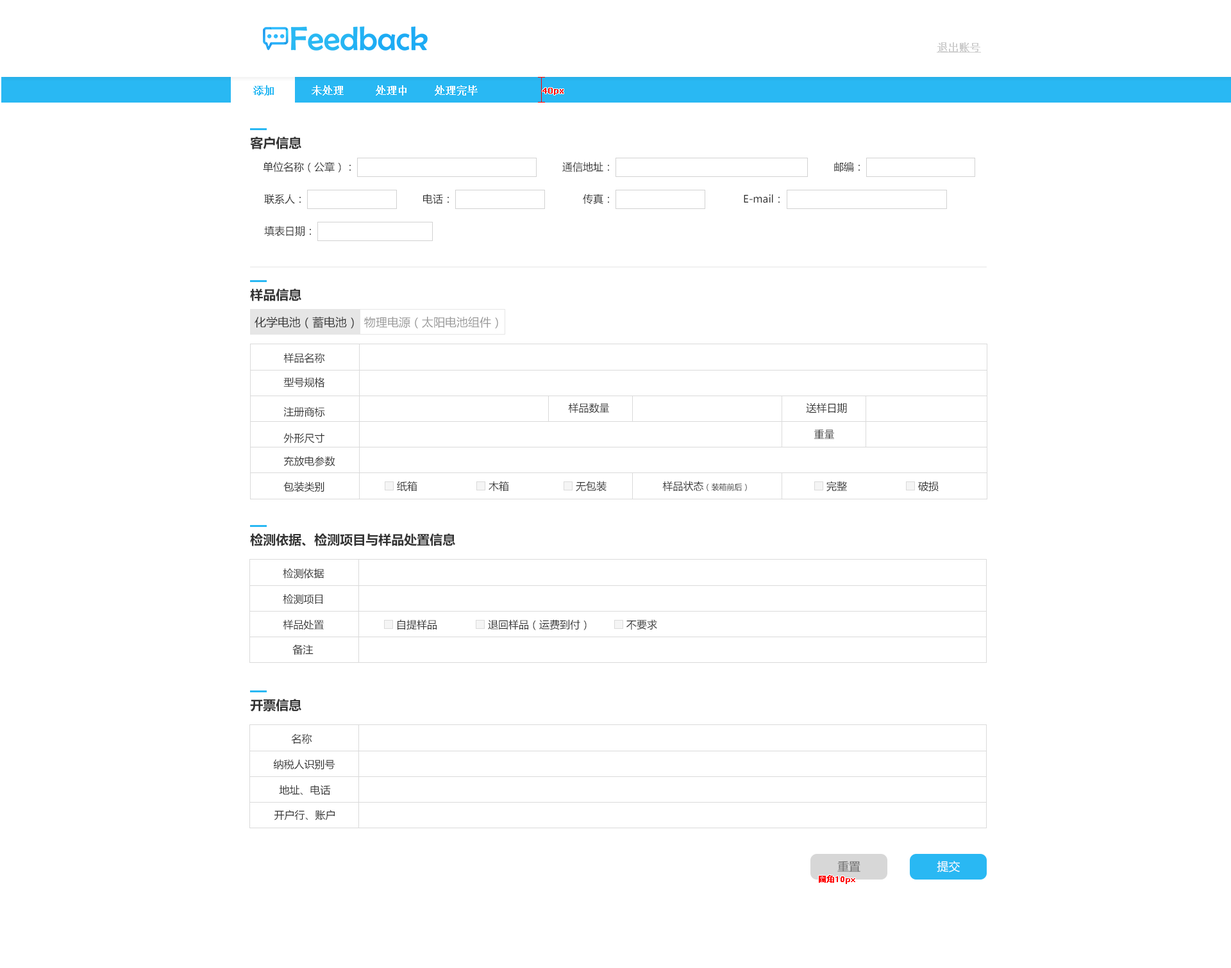
<style>
.page{position:relative;width:1231px;height:968px;background:#ffffff}
.page>*{position:absolute;margin:0}
.t1{font:10.3px "SimSun";color:#cecece;font-weight:bold;text-decoration:underline}
.t2{font:10.3px "SimSun";color:#29b8f3;font-weight:bold}
.t3{font:10.3px "SimSun";color:#fffefe;font-weight:bold}
.t4{font:10.3px "SimSun";color:#ffffff;font-weight:bold}
.t5{font:7.7px "Verdana";color:#ff0000;font-weight:bold}
.t6{font:12.8px "MicrosoftYaHei-Bold";color:#333333}
.t7{font:10.3px "MicrosoftYaHei";color:#333333}
.t8{font:11.5px "MicrosoftYaHei";color:#333333}
.t9{font:11.5px "MicrosoftYaHei";color:#999999}
.t10{font:7.7px "MicrosoftYaHei";color:#333333}
.t11{font:11.5px "MicrosoftYaHei";color:#666666}
.t12{font:11.5px "MicrosoftYaHei";color:#fefefe}
.t13{font:7.7px "MicrosoftYaHei";color:#ff0000;font-weight:bold}
</style>
<div class="page">
<p class="t1" style="left:937px;top:42px;width:44px;height:11px">退出账号</p>
<p class="t2" style="left:253px;top:85px;width:21px;height:11px">添加</p>
<p class="t3" style="left:312px;top:85px;width:32px;height:11px">未处理</p>
<p class="t4" style="left:376px;top:85px;width:31px;height:11px">处理中</p>
<p class="t4" style="left:435px;top:85px;width:43px;height:11px">处理完毕</p>
<p class="t5" style="left:543px;top:88px;width:21px;height:7px">40px</p>
<p class="t6" style="left:250px;top:137px;width:51px;height:12px">客户信息</p>
<p class="t7" style="left:263px;top:162px;width:88px;height:11px">单位名称（公章）：</p>
<p class="t7" style="left:562px;top:162px;width:47px;height:11px">通信地址：</p>
<p class="t7" style="left:834px;top:162px;width:26px;height:11px">邮编：</p>
<p class="t7" style="left:264px;top:194px;width:37px;height:11px">联系人：</p>
<p class="t7" style="left:423px;top:194px;width:26px;height:10px">电话：</p>
<p class="t7" style="left:583px;top:194px;width:26px;height:11px">传真：</p>
<p class="t7" style="left:744px;top:194px;width:36px;height:9px">E-mail：</p>
<p class="t7" style="left:264px;top:226px;width:47px;height:11px">填表日期：</p>
<p class="t6" style="left:250px;top:289px;width:51px;height:12px">样品信息</p>
<p class="t8" style="left:255px;top:317px;width:99px;height:12px">化学电池（蓄电池）</p>
<p class="t9" style="left:364px;top:317px;width:134px;height:12px">物理电源（太阳电池组件）</p>
<p class="t7" style="left:283px;top:353px;width:42px;height:11px">样品名称</p>
<p class="t7" style="left:283px;top:377px;width:42px;height:11px">型号规格</p>
<p class="t7" style="left:283px;top:407px;width:42px;height:11px">注册商标</p>
<p class="t7" style="left:568px;top:403px;width:41px;height:11px">样品数量</p>
<p class="t7" style="left:806px;top:403px;width:41px;height:11px">送样日期</p>
<p class="t7" style="left:283px;top:433px;width:42px;height:11px">外形尺寸</p>
<p class="t7" style="left:814px;top:430px;width:20px;height:9px">重量</p>
<p class="t7" style="left:283px;top:456px;width:52px;height:11px">充放电参数</p>
<p class="t7" style="left:283px;top:482px;width:42px;height:11px">包装类别</p>
<p class="t7" style="left:397px;top:481px;width:21px;height:10px">纸箱</p>
<p class="t7" style="left:489px;top:481px;width:20px;height:10px">木箱</p>
<p class="t7" style="left:576px;top:481px;width:31px;height:11px">无包装</p>
<p class="t10" style="left:662px;top:481px;width:85px;height:10px"><span class="t7">样品状态</span>（装箱前后）</p>
<p class="t7" style="left:827px;top:481px;width:20px;height:11px">完整</p>
<p class="t7" style="left:918px;top:481px;width:21px;height:11px">破损</p>
<p class="t6" style="left:250px;top:534px;width:205px;height:12px">检测依据、检测项目与样品处置信息</p>
<p class="t7" style="left:283px;top:568px;width:42px;height:11px">检测依据</p>
<p class="t7" style="left:283px;top:594px;width:40px;height:11px">检测项目</p>
<p class="t7" style="left:283px;top:620px;width:41px;height:10px">样品处置</p>
<p class="t7" style="left:398px;top:620px;width:39px;height:10px">自提样品</p>
<p class="t7" style="left:488px;top:620px;width:99px;height:10px">退回样品（运费到付）</p>
<p class="t7" style="left:627px;top:620px;width:30px;height:10px">不要求</p>
<p class="t7" style="left:292px;top:645px;width:22px;height:10px">备注</p>
<p class="t6" style="left:250px;top:699px;width:51px;height:13px">开票信息</p>
<p class="t7" style="left:291px;top:734px;width:21px;height:11px">名称</p>
<p class="t7" style="left:273px;top:759px;width:62px;height:11px">纳税人识别号</p>
<p class="t7" style="left:279px;top:785px;width:52px;height:10px">地址、电话</p>
<p class="t7" style="left:274px;top:810px;width:61px;height:11px">开户行、账户</p>
<p class="t11" style="left:838px;top:861px;width:23px;height:11px">重置</p>
<p class="t12" style="left:937px;top:861px;width:23px;height:12px">提交</p>
<p class="t13" style="left:819px;top:875px;width:37px;height:9px">圆角10px</p>
</div>
